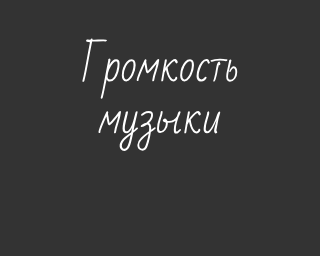
<style>
.page{position:relative;width:320px;height:256px;background:#333333}
.page>*{position:absolute;margin:0}
.t1{font:43px "BadScript-Regular";color:#ffffff}
</style>
<div class="page">
<p class="t1" style="left:82px;top:38px;width:156px;height:113px;text-align:center">Громкость<br>музыки</p>
</div>
